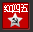
<style>
.page{position:relative;width:33px;height:32px;background:#c50000}
.page>*{position:absolute;margin:0}
.t1{font:10.4px "SimSun";letter-spacing:-0.25em;color:#ffffff}
</style>
<div class="page">
<p class="t1" style="left:4px;top:4px;width:24px;height:9px">红四五</p>
</div>
